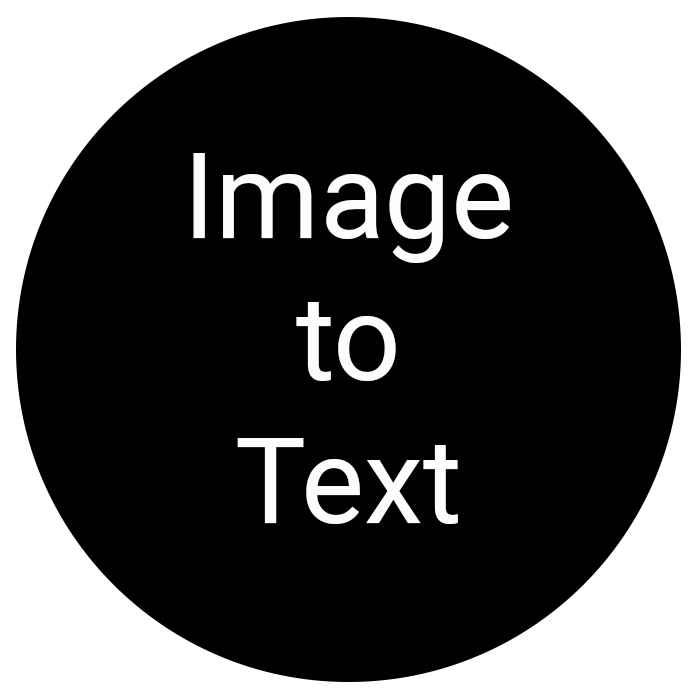
<style>
.page{position:relative;width:700px;height:700px;background:#000000}
.page>*{position:absolute;margin:0}
.t1{font:119px "Roboto-Regular";color:#fefcfc}
</style>
<div class="page">
<p class="t1" style="left:193px;top:153px;width:317px;height:371px;text-align:center">Image<br>to<br>Text</p>
</div>
